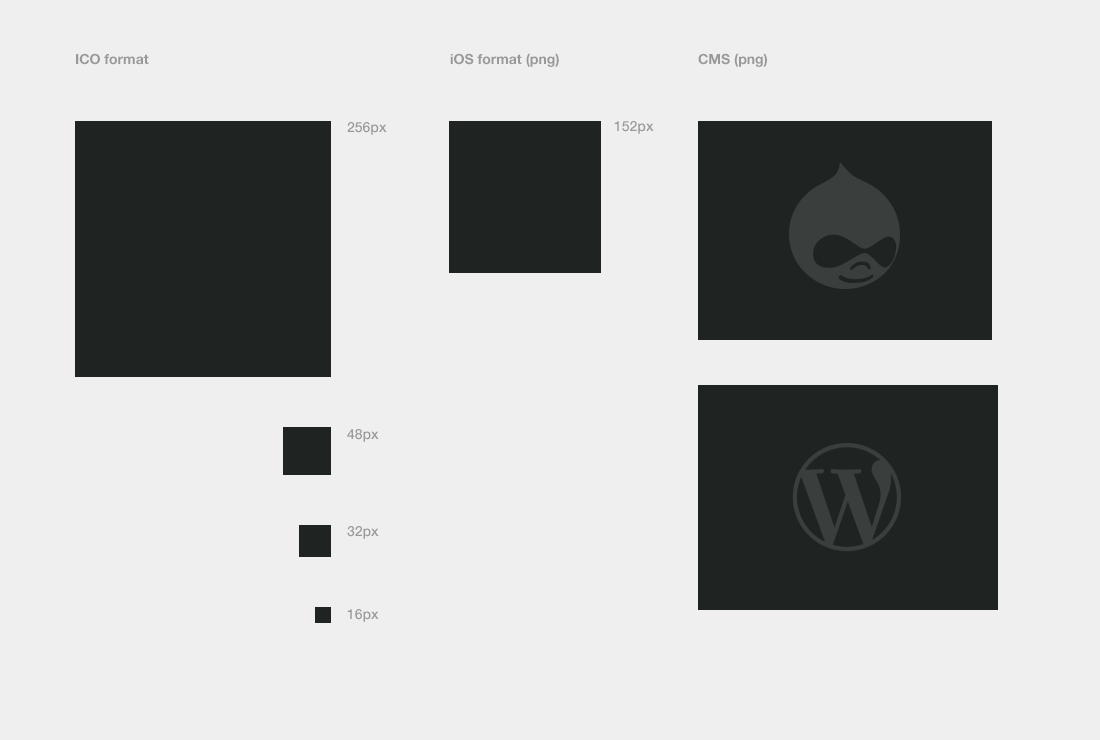
<style>
.page{position:relative;width:1100px;height:740px;background:#efefef}
.page>*{position:absolute;margin:0}
.t1{font:14px "HelveticaNeueLTStd-Bd";color:#999999}
.t2{font:14px/99px "HelveticaNeueLTStd-Md";color:#999999}
.t3{font:14px/307px "HelveticaNeueLTStd-Md";color:#999999}
.t4{font:14px/97px "HelveticaNeueLTStd-Md";color:#999999}
.t5{font:14px/83px "HelveticaNeueLTStd-Md";color:#999999}
.t6{font:14px "HelveticaNeueLTStd-Md";color:#999999}
</style>
<div class="page">
<p class="t1" style="left:76px;top:53px;width:73px;height:12px">ICO format</p>
<p class="t1" style="left:450px;top:53px;width:109px;height:14px">iOS format (png)</p>
<p class="t1" style="left:698px;top:53px;width:69px;height:14px">CMS (png)</p>
<p class="t2" style="left:347px;top:122px;width:40px;height:500px">256px<br><span class="t3">48px<br></span><span class="t4">32px<br></span><span class="t5">16px</span></p>
<p class="t6" style="left:614px;top:121px;width:40px;height:13px">152px</p>
</div>
